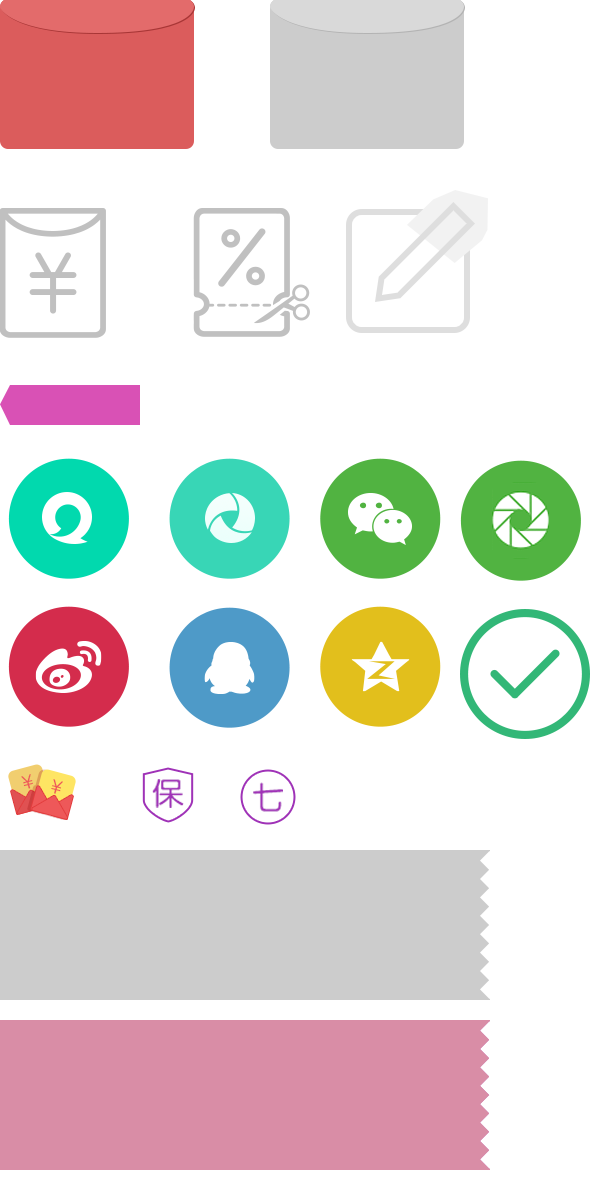
<style>
.page{position:relative;width:600px;height:1200px;background:#ffffff}
.page>*{position:absolute;margin:0}
.t1{font:30.9px "FZY3FW--GB1-0";color:#a032b7}
</style>
<div class="page">
<p class="t1" style="left:152px;top:779px;width:32px;height:29px">保</p>
<p class="t1" style="left:253px;top:782px;width:30px;height:30px">七</p>
</div>
